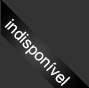
<style>
.page{position:relative;width:89px;height:88px;background:#333333}
.page>*{position:absolute;margin:0}
.t1{font:15.9px "ArialMT";color:#ffffff}
</style>
<div class="page">
<p class="t1" style="left:4px;top:18px;width:67px;height:68px;rotate:46deg">indisponível</p>
</div>
